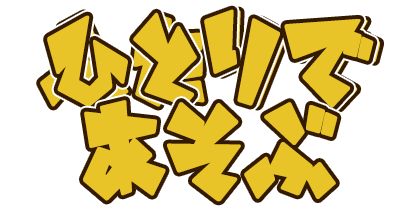
<style>
.page{position:relative;width:420px;height:210px;background:#ffffff}
.page>*{position:absolute;margin:0}
.t1{font:108.3px "AnnyantRoman";color:#e9c429}
.t2{font:112.5px "AnnyantRoman";color:#e9c429}
</style>
<div class="page">
<p class="t1" style="left:40px;top:10px;width:340px;height:99px">ふたりで</p>
<p class="t1" style="left:47px;top:9px;width:327px;height:99px">ひとりで</p>
<p class="t2" style="left:83px;top:100px;width:255px;height:102px">あそぶ</p>
</div>
